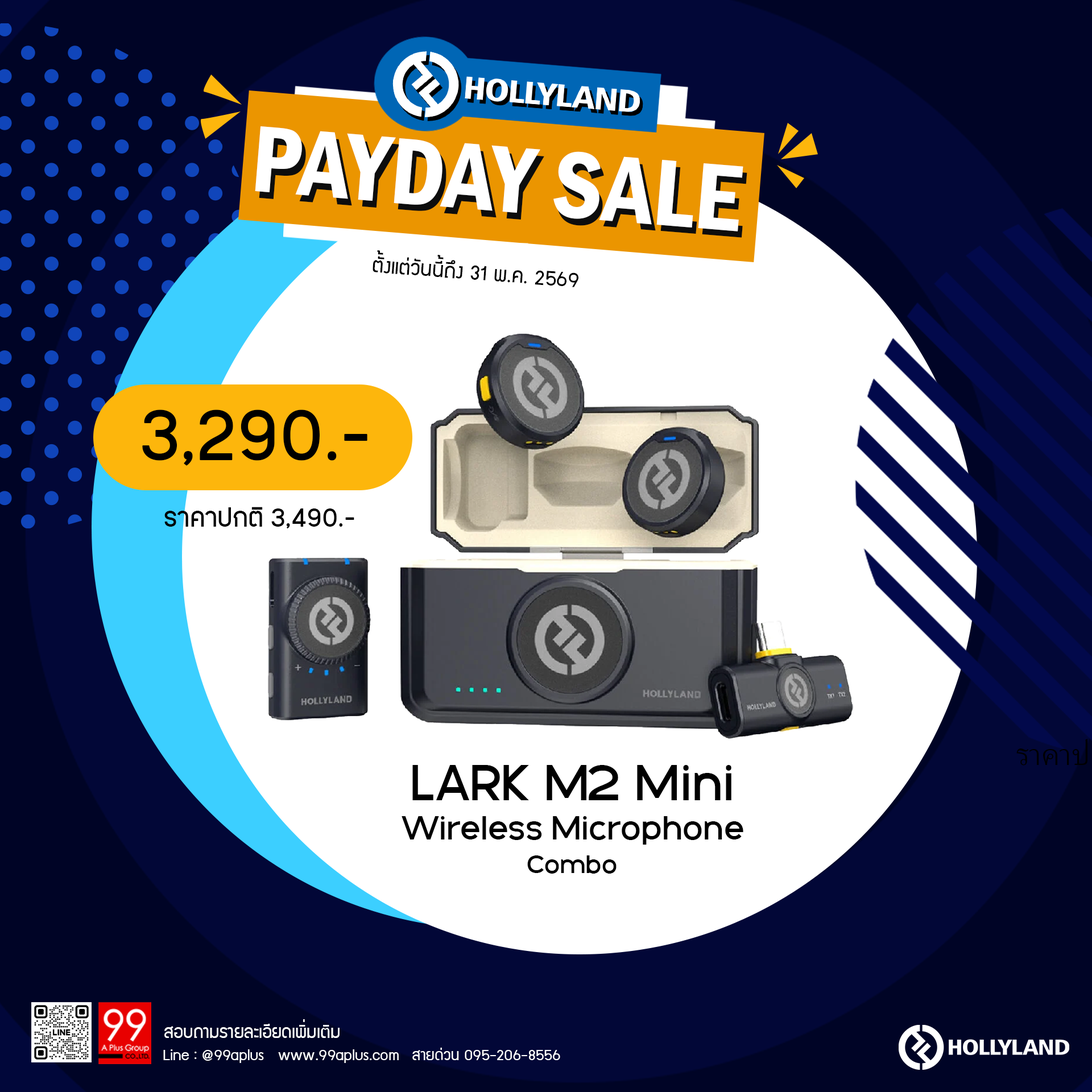
<style>
.page{position:relative;width:1092px;height:1092px;background:#ffffff}
.page>*{position:absolute;margin:0}
.t1{font:97.5px "FranklinGothic-DemiCond";color:#ffffff}
.t2{font:97.5px "FranklinGothic-DemiCond"}
.t3{font:23.2px "supermarket";color:#000000}
.t4{font:83.5px "PK-NakhonPathom-Demo";color:#000000}
.t5{font:30.3px "PK-NakhonPathom-Demo";color:#000000}
.t6{font:54px "GalakPro-Demo";color:#000000}
.t7{font:35.6px "GalakPro-Demo";color:#000000}
.t8{font:27.1px "GalakPro-Demo";color:#000000}
.t9{font:19.8px "supermarket";color:#ffffff}
.t10{font:17.2px "supermarket";color:#ffffff}
</style>
<div class="page">
<p class="t1" style="left:255px;top:126px;width:488px;height:105px;rotate:5deg">PAYDAY SALE</p>
<p class="t2" style="left:259px;top:133px;width:488px;height:105px;rotate:5deg">PAYDAY SALE</p>
<p class="t3" style="left:373px;top:250px;width:205px;height:37px;rotate:4deg">ตั้งแต่วันนี้ถึง 31 พ.ค. 2569</p>
<p class="t4" style="left:142px;top:409px;width:225px;height:57px">3,290.-</p>
<p class="t5" style="left:164px;top:507px;width:190px;height:21px">ราคาปกติ 3,490.-</p>
<p class="t6" style="left:412px;top:765px;width:319px;height:35px">LARK M2 Mini</p>
<p class="t7" style="left:402px;top:816px;width:341px;height:29px">Wireless Microphone</p>
<p class="t8" style="left:527px;top:855px;width:90px;height:19px">Combo</p>
<p class="t9" style="left:164px;top:1019px;width:176px;height:19px">สอบถามรายละเอียดเพิ่มเติม</p>
<p class="t10" style="left:163px;top:1049px;width:236px;height:14px">Line : @99aplus   www.99aplus.com</p>
<p class="t10" style="left:412px;top:1048px;width:148px;height:12px">สายด่วน 095-206-8556</p>
</div>
